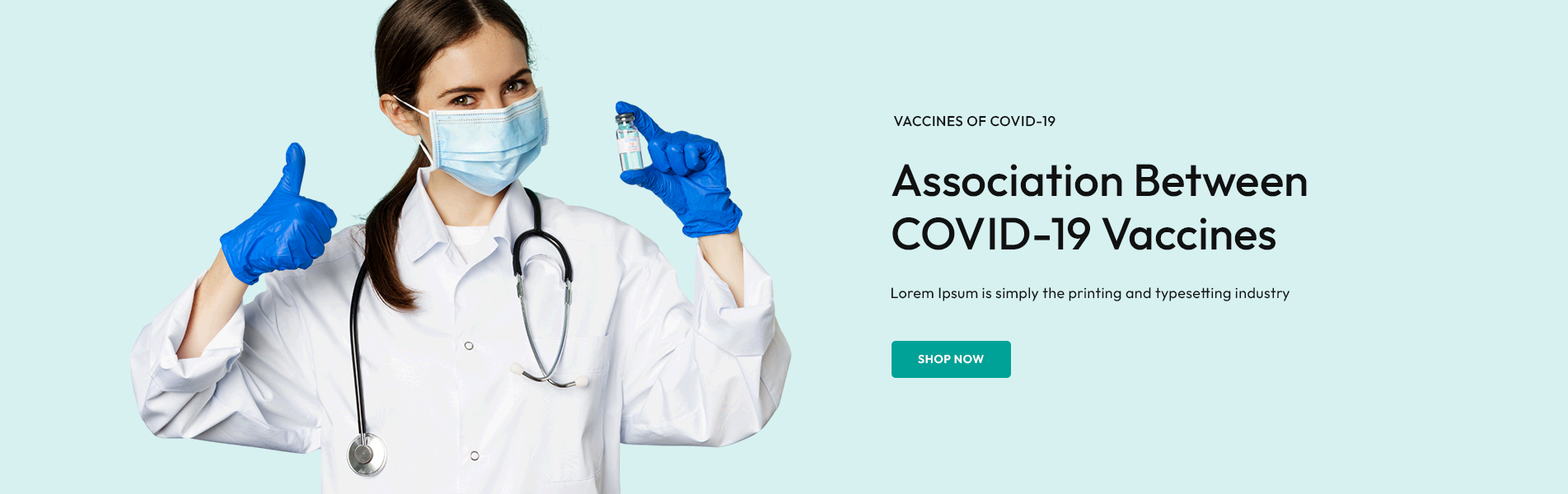
<style>
.page{position:relative;width:1568px;height:494px;background:#d7f1f1}
.page>*{position:absolute;margin:0}
.t1{font:14px "Outfit-Medium";letter-spacing:0.035em;color:#111111;text-transform:uppercase}
.t2{font:45.3px/53.6px "Outfit-Medium";color:#111111}
.t3{font:14.8px "Outfit-Regular";letter-spacing:0.02em;color:#111111}
.t4{font:11.5px "Outfit-SemiBold";letter-spacing:0.05em;color:#ffffff;text-transform:uppercase}
</style>
<div class="page">
<p class="t1" style="left:894px;top:115px;width:161px;height:12px">Vaccines of COVID-19</p>
<p class="t2" style="left:892px;top:164px;width:415px;height:86px">Association Between <br>COVID-19 Vaccines</p>
<p class="t3" style="left:891px;top:288px;width:399px;height:14px">Lorem Ipsum is simply the printing and typesetting industry</p>
<p class="t4" style="left:918px;top:354px;width:66px;height:10px">Shop Now</p>
</div>
